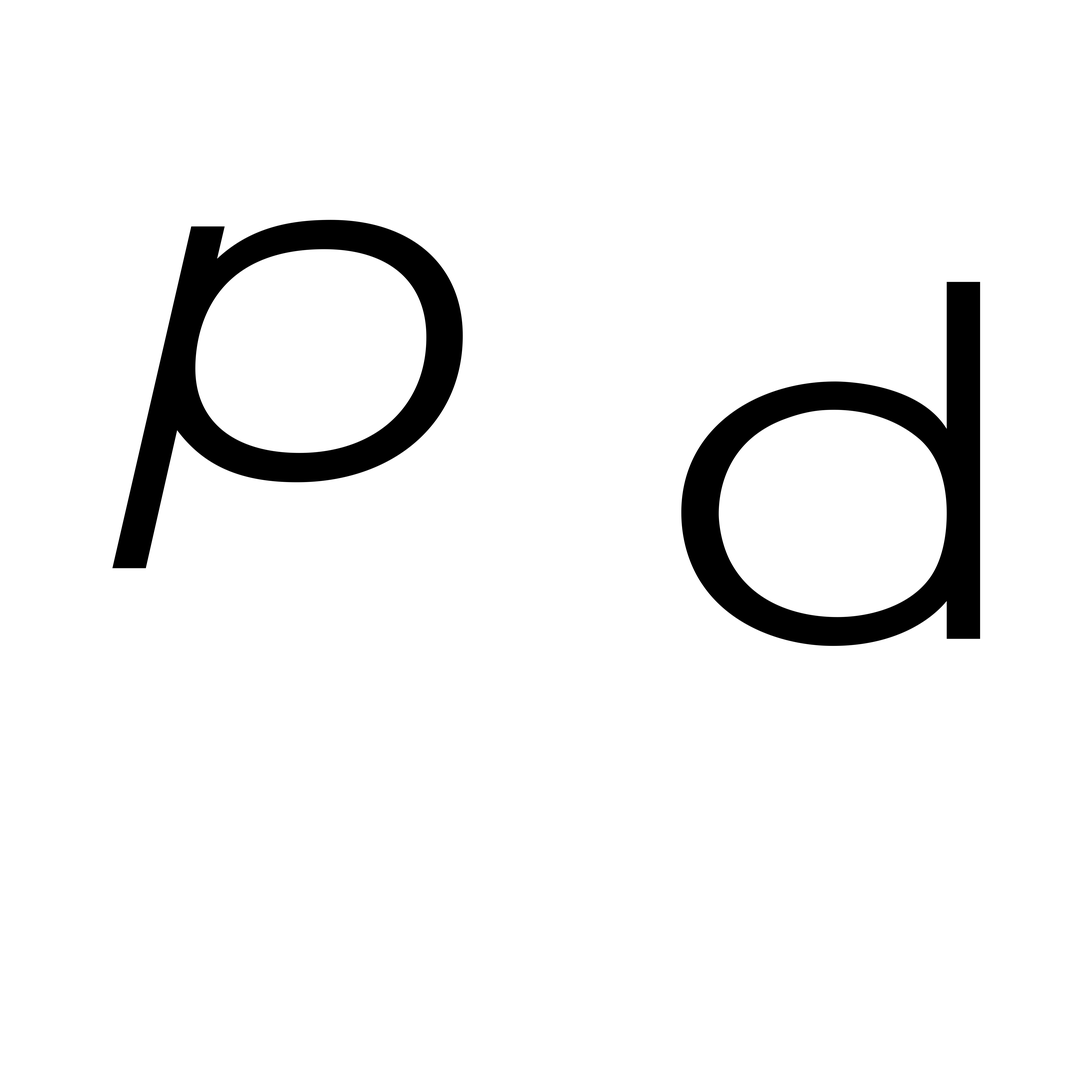
<style>
.page{position:relative;width:1092px;height:1092px;background:#ffffff}
.page>*{position:absolute;margin:0}
.t1{font:505.5px "AkzidenzGroteskPro-LigExtIt";color:#000000}
.t2{font:505.5px "AkzidenzGroteskPro-LightEx";color:#000000}
</style>
<div class="page">
<p class="t1" style="left:112px;top:220px;width:351px;height:348px">p</p>
<p class="t2" style="left:681px;top:282px;width:299px;height:364px">d</p>
</div>
